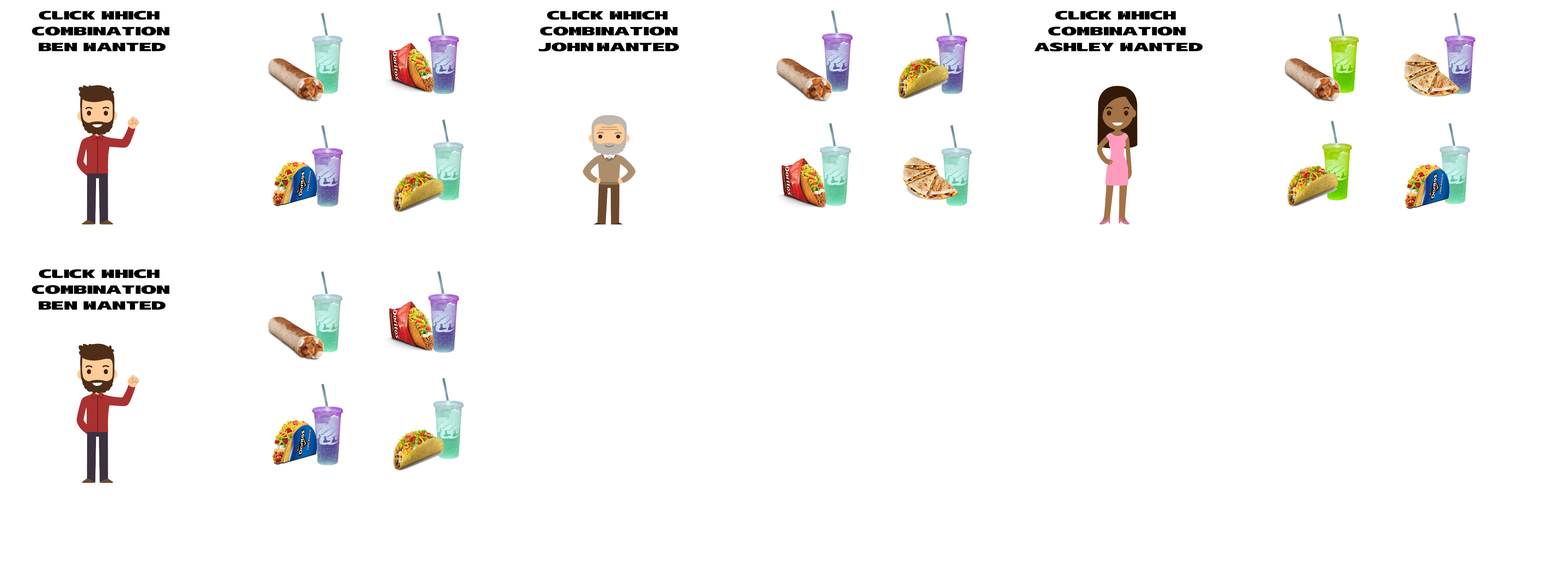
<style>
.page{position:relative;width:1568px;height:577px;background:#ffffff}
.page>*{position:absolute;margin:0}
.t1{font:11.9px/15.8px "TacoBell-Bold";color:#000000}
</style>
<div class="page">
<p class="t1" style="left:32px;top:269px;width:138px;height:41px;text-align:center">click  which <br>combination<br> ben  wanted</p>
</div>
